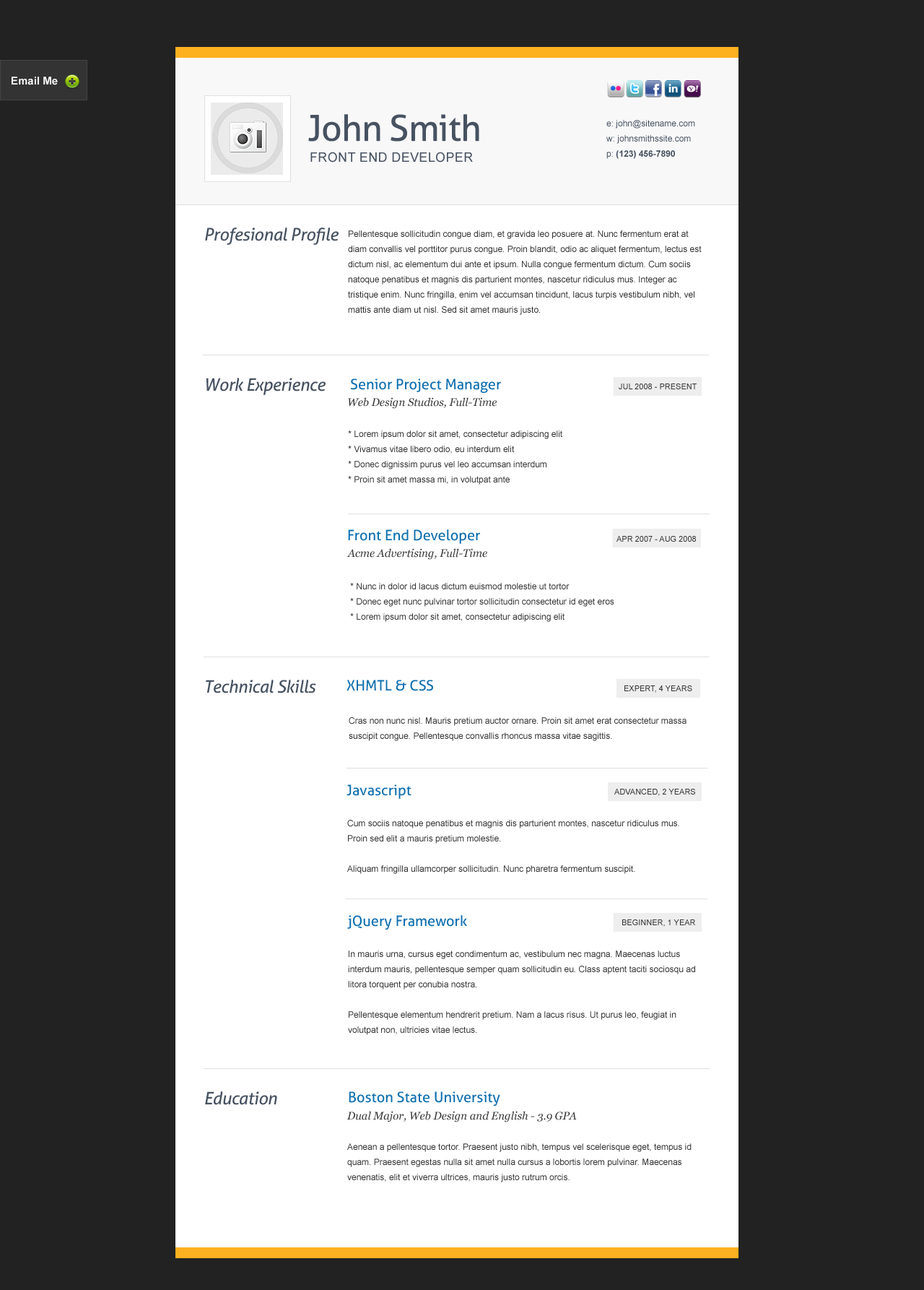
<style>
.page{position:relative;width:924px;height:1290px;background:#222222}
.page>*{position:absolute;margin:0}
.t1{font:10.8px "Arial-BoldMT";color:#ffffff}
.t2{font:36.1px "Aller";letter-spacing:-0.02em;color:#475261}
.t3{font:8.7px/15.2px "ArialMT";color:#475261}
.t4{font:8.7px/15.2px "Arial-BoldMT";color:#475261}
.t5{font:13px "ArialMT";letter-spacing:0.02em;color:#475261}
.t6{font:17.3px "Aller-Italic";letter-spacing:-0.02em;color:#475261}
.t7{font:8.7px/15.2px "ArialMT";color:#333333}
.t8{font:14.4px "Aller";color:#0f6faf}
.t9{font:7.9px "ArialMT";color:#333333}
.t10{font:10.8px "Georgia-Italic";color:#333333}
</style>
<div class="page">
<p class="t1" style="left:12px;top:77px;width:46px;height:8px">Email Me</p>
<p class="t2" style="left:308px;top:114px;width:172px;height:28px">John Smith</p>
<p class="t3" style="left:607px;top:120px;width:89px;height:39px">e: john@sitename.com<br>w: johnsmithssite.com<br>p: <span class="t4">(123) 456-7890</span></p>
<p class="t5" style="left:311px;top:152px;width:162px;height:11px">FRONT END DEVELOPER</p>
<p class="t6" style="left:205px;top:228px;width:134px;height:17px">Profesional Profile</p>
<p class="t7" style="left:348px;top:230px;width:354px;height:85px">Pellentesque sollicitudin congue diam, et gravida leo posuere at. Nunc fermentum erat at <br>diam convallis vel porttitor purus congue. Proin blandit, odio ac aliquet fermentum, lectus est <br>dictum nisl, ac elementum dui ante et ipsum. Nulla congue fermentum dictum. Cum sociis <br>natoque penatibus et magnis dis parturient montes, nascetur ridiculus mus. Integer ac <br>tristique enim. Nunc fringilla, enim vel accumsan tincidunt, lacus turpis vestibulum nibh, vel <br>mattis ante diam ut nisl. Sed sit amet mauris justo.</p>
<p class="t6" style="left:206px;top:378px;width:120px;height:17px">Work Experience</p>
<p class="t8" style="left:351px;top:378px;width:150px;height:15px">Senior Project Manager</p>
<p class="t9" style="left:619px;top:384px;width:78px;height:5px">JUL 2008 - PRESENT</p>
<p class="t10" style="left:348px;top:397px;width:149px;height:12px">Web Design Studios, Full-Time</p>
<p class="t7" style="left:348px;top:430px;width:215px;height:55px">* Lorem ipsum dolor sit amet, consectetur adipiscing elit<br>    * Vivamus vitae libero odio, eu interdum elit<br>    * Donec dignissim purus vel leo accumsan interdum<br>    * Proin sit amet massa mi, in volutpat ante</p>
<p class="t8" style="left:348px;top:529px;width:132px;height:15px">Front End Developer</p>
<p class="t9" style="left:617px;top:536px;width:79px;height:6px">APR 2007 - AUG 2008</p>
<p class="t10" style="left:347px;top:548px;width:141px;height:12px">Acme Advertising, Full-Time</p>
<p class="t7" style="left:350px;top:583px;width:265px;height:39px">* Nunc in dolor id lacus dictum euismod molestie ut tortor<br>    * Donec eget nunc pulvinar tortor sollicitudin consectetur id eget eros<br>    * Lorem ipsum dolor sit amet, consectetur adipiscing elit</p>
<p class="t6" style="left:206px;top:680px;width:110px;height:13px">Technical Skills</p>
<p class="t8" style="left:347px;top:680px;width:86px;height:11px">XHMTL &amp; CSS</p>
<p class="t9" style="left:625px;top:685px;width:68px;height:8px">EXPERT, 4 YEARS</p>
<p class="t7" style="left:349px;top:717px;width:338px;height:24px">Cras non nunc nisl. Mauris pretium auctor ornare. Proin sit amet erat consectetur massa <br>suscipit congue. Pellentesque convallis rhoncus massa vitae sagittis.</p>
<p class="t8" style="left:347px;top:784px;width:65px;height:15px">Javascript</p>
<p class="t9" style="left:615px;top:789px;width:81px;height:7px">ADVANCED, 2 YEARS</p>
<p class="t7" style="left:347px;top:820px;width:333px;height:54px">Cum sociis natoque penatibus et magnis dis parturient montes, nascetur ridiculus mus. <br>Proin sed elit a mauris pretium molestie.<br><br>Aliquam fringilla ullamcorper sollicitudin. Nunc pharetra fermentum suscipit.</p>
<p class="t8" style="left:347px;top:915px;width:120px;height:15px">jQuery Framework</p>
<p class="t9" style="left:623px;top:919px;width:73px;height:8px">BEGINNER, 1 YEAR</p>
<p class="t7" style="left:348px;top:950px;width:348px;height:85px">In mauris urna, cursus eget condimentum ac, vestibulum nec magna. Maecenas luctus <br>interdum mauris, pellentesque semper quam sollicitudin eu. Class aptent taciti sociosqu ad <br>litora torquent per conubia nostra.<br><br>Pellentesque elementum hendrerit pretium. Nam a lacus risus. Ut purus leo, feugiat in <br>volutpat non, ultricies vitae lectus.</p>
<p class="t6" style="left:205px;top:1091px;width:72px;height:14px">Education</p>
<p class="t8" style="left:349px;top:1091px;width:152px;height:15px">Boston State University</p>
<p class="t10" style="left:347px;top:1111px;width:230px;height:11px">Dual Major, Web Design and English - 3.9 GPA</p>
<p class="t7" style="left:347px;top:1143px;width:345px;height:39px">Aenean a pellentesque tortor. Praesent justo nibh, tempus vel scelerisque eget, tempus id <br>quam. Praesent egestas nulla sit amet nulla cursus a lobortis lorem pulvinar. Maecenas <br>venenatis, elit et viverra ultrices, mauris justo rutrum orcis.</p>
</div>
